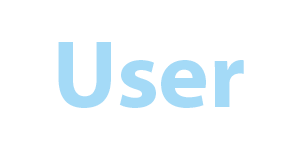
<style>
.page{position:relative;width:300px;height:150px;background:#ffffff}
.page>*{position:absolute;margin:0}
.t1{font:96px "MyriadPro-Bold";color:#a4daf7}
</style>
<div class="page">
<p class="t1" style="left:58px;top:42px;width:186px;height:66px">User</p>
</div>
